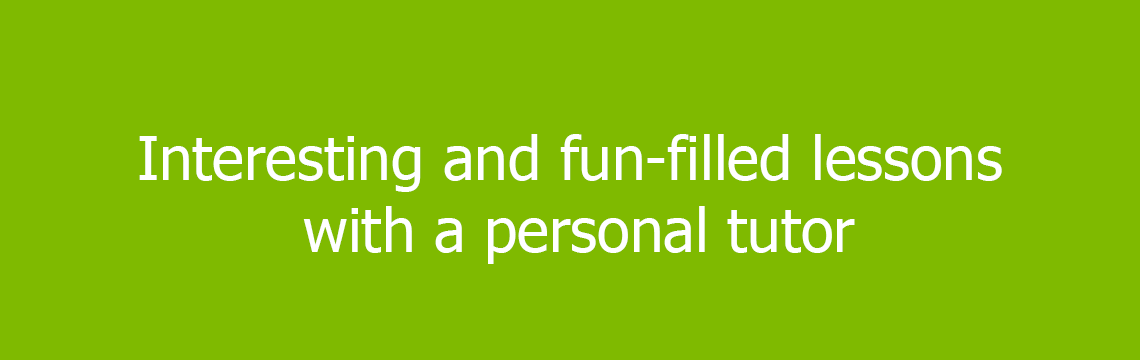
<style>
.page{position:relative;width:1140px;height:360px;background:#7fba00}
.page>*{position:absolute;margin:0}
.t1{font:60px "Tahoma";color:#ffffff}
</style>
<div class="page">
<p class="t1" style="left:139px;top:134px;width:863px;height:130px;text-align:center">Interesting and fun-filled lessons <br>with a personal tutor</p>
</div>
